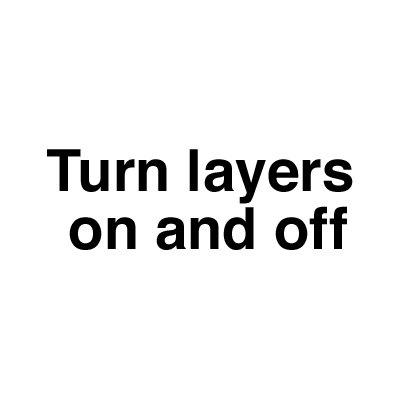
<style>
.page{position:relative;width:400px;height:400px;background:#ffffff}
.page>*{position:absolute;margin:0}
.t1{font:57.9px/57.9px "Helvetica-Bold";color:#000000}
</style>
<div class="page">
<p class="t1" style="left:47px;top:149px;width:306px;height:101px;text-align:center">Turn layers <br>on and off</p>
</div>
